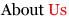
<style>
.page{position:relative;width:69px;height:18px;background:#ffffff}
.page>*{position:absolute;margin:0}
.t1{font:16px "Georgia";color:#000000}
.t2{font:16px "Georgia";color:#ff0000}
</style>
<div class="page">
<p class="t1" style="left:0px;top:3px;width:67px;height:13px">About <span class="t2">Us</span></p>
</div>
